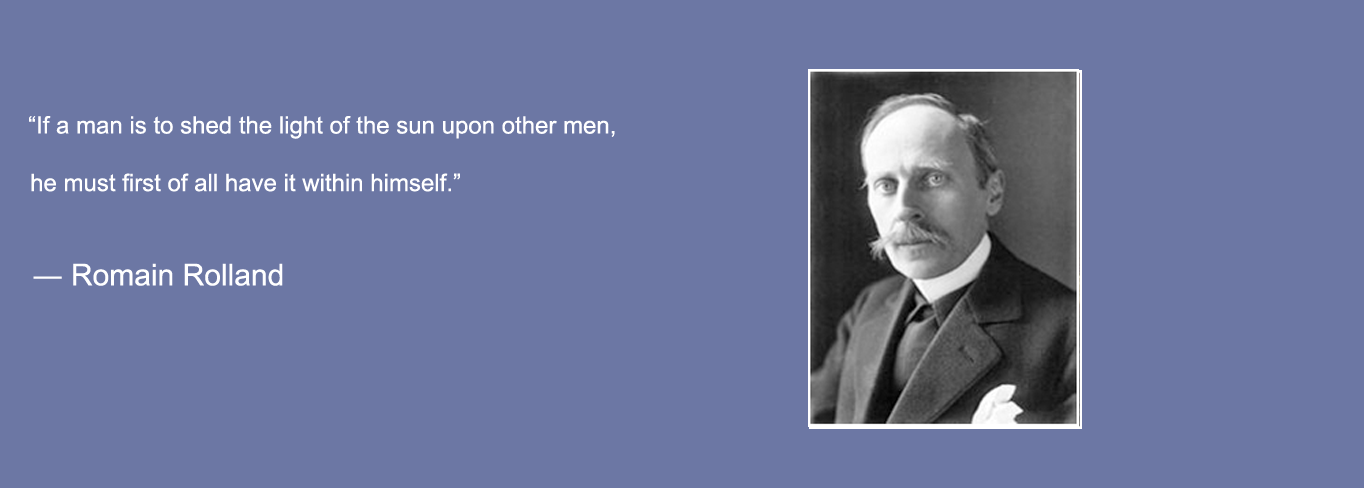
<style>
.page{position:relative;width:1364px;height:488px;background:#6c77a4}
.page>*{position:absolute;margin:0}
.t1{font:24px "ArialMT";color:#ffffff}
.t2{font:30px "ArialMT";color:#ffffff}
</style>
<div class="page">
<p class="t1" style="left:29px;top:116px;width:586px;height:76px;text-align:center">“If a man is to shed the light of the sun upon other men,                                                     <br><br>he must first of all have it within himself.”</p>
<p class="t2" style="left:33px;top:263px;width:250px;height:23px">― Romain Rolland</p>
</div>
